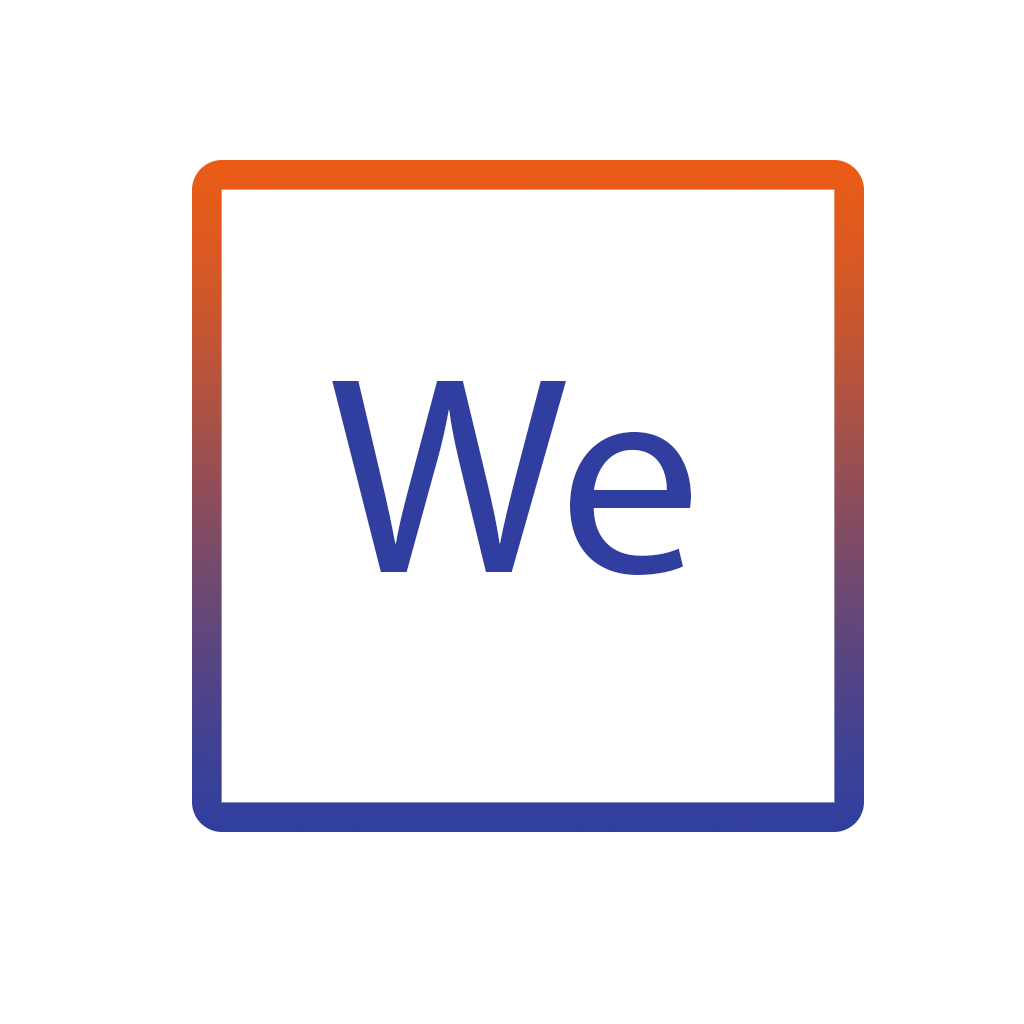
<style>
.page{position:relative;width:1024px;height:1024px;background:#ffffff}
.page>*{position:absolute;margin:0}
.t1{font:284px "MyriadPro-Regular";color:#303f9f}
</style>
<div class="page">
<p class="t1" style="left:332px;top:381px;width:359px;height:194px">We</p>
</div>
